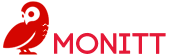
<style>
.page{position:relative;width:180px;height:56px;background:#ffffff}
.page>*{position:absolute;margin:0}
.t1{font:30px "Code-Bold";letter-spacing:0.05em;color:#e51937}
</style>
<div class="page">
<p class="t1" style="left:54px;top:32px;width:112px;height:22px">MONITT</p>
</div>
